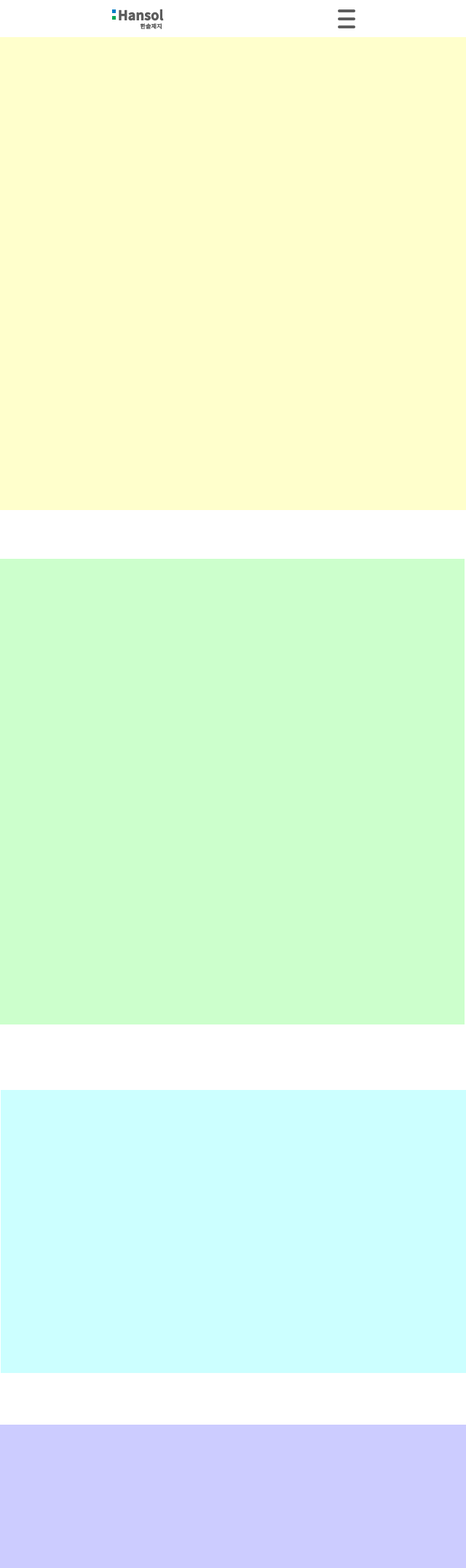
<style>
.page{position:relative;width:466px;height:1568px;background:#ffffcc}
.page>*{position:absolute;margin:0}
.t1{font:13.1px "NotoSansKR-Bold";letter-spacing:-0.02em;color:#5d5d5d;font-weight:bold}
.t2{font:5.8px "NotoSansKR-Medium";color:#5d5d5d;font-weight:bold}
</style>
<div class="page">
<p class="t1" style="left:119px;top:9px;width:45px;height:12px">Hansol</p>
<p class="t2" style="left:140px;top:23px;width:22px;height:6px">한솔제지</p>
</div>
